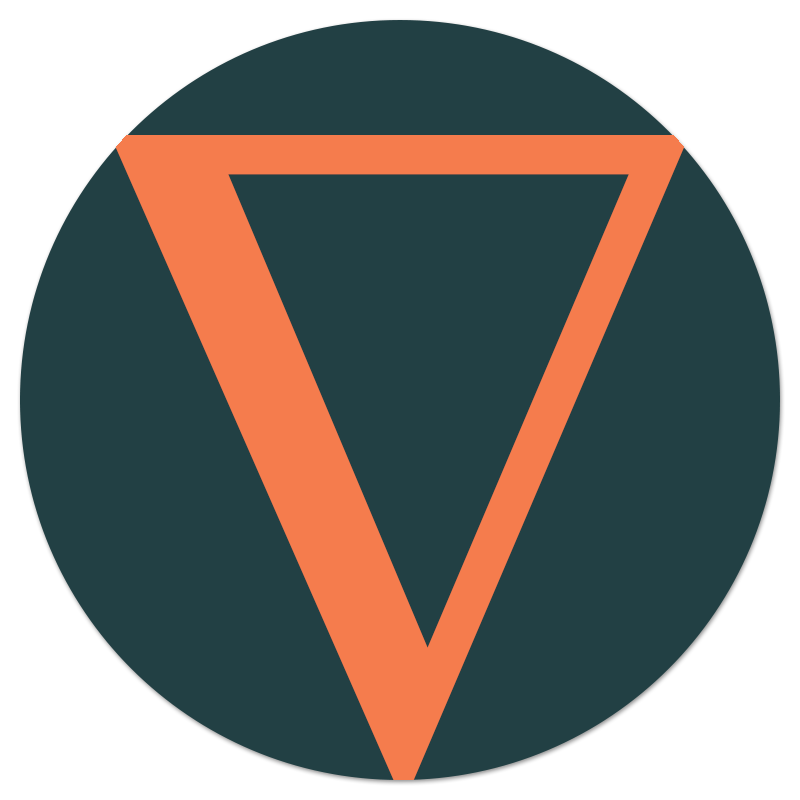
<style>
.page{position:relative;width:800px;height:800px;background:#224044}
.page>*{position:absolute;margin:0}
.t1{font:958.3px "STIXGeneral-Regular";color:#f57c4d}
</style>
<div class="page">
<p class="t1" style="left:110px;top:135px;width:580px;height:647px">∇</p>
</div>
